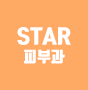
<style>
.page{position:relative;width:88px;height:90px;background:#ffaa64}
.page>*{position:absolute;margin:0}
.t1{font:20px "TmonMonsoriBlack";color:#ffffff}
.t2{font:15px "TmonMonsoriBlack";color:#ffffff}
</style>
<div class="page">
<p class="t1" style="left:17px;top:27px;width:54px;height:18px">STAR</p>
<p class="t2" style="left:24px;top:49px;width:41px;height:15px">피부과</p>
</div>
